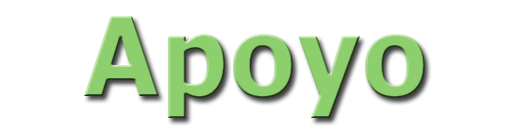
<style>
.page{position:relative;width:512px;height:128px;background:#ffffff}
.page>*{position:absolute;margin:0}
.t1{font:109.7px "Verdana-Bold";color:#8ecf6d;scale:0.9 1}
</style>
<div class="page">
<p class="t1" style="left:84px;top:16px;width:341px;height:102px">Apoyo</p>
</div>
